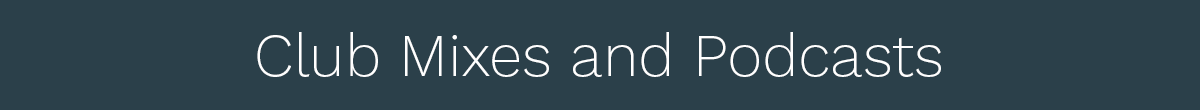
<style>
.page{position:relative;width:1200px;height:110px;background:#2b404a}
.page>*{position:absolute;margin:0}
.t1{font:60px "WorkSans-ExtraLight";color:#ffffff}
</style>
<div class="page">
<p class="t1" style="left:257px;top:32px;width:684px;height:45px">Club Mixes and Podcasts</p>
</div>
